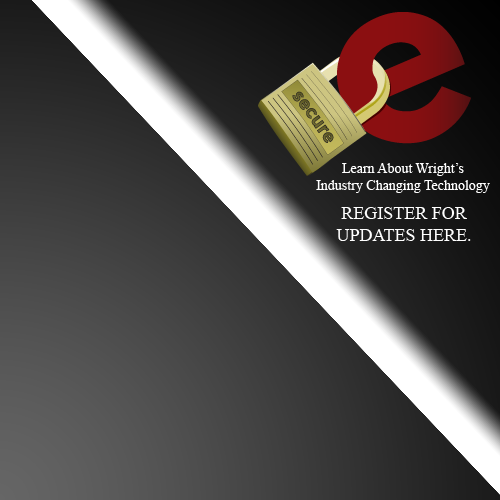
<style>
.page{position:relative;width:500px;height:500px}
.page>*{position:absolute;margin:0}
.t1{font:14px "TimesNewRomanPSMT";color:#ffffff}
.t2{font:18px "TimesNewRomanPSMT";color:#ffffff;text-transform:uppercase}
</style>
<div class="page">
<p class="t1" style="left:316px;top:163px;width:174px;height:30px;text-align:center">Learn About Wright’s<br>Industry Changing Technology</p>
<p class="t2" style="left:336px;top:207px;width:135px;height:34px;text-align:center">register for<br>updates here.</p>
</div>
